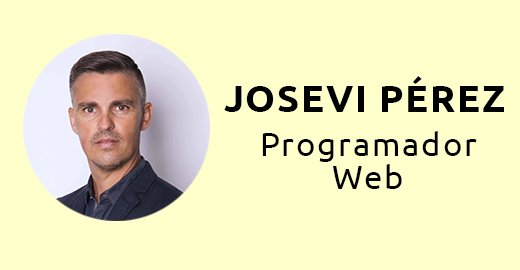
<style>
.page{position:relative;width:520px;height:270px;background:#ffffcc}
.page>*{position:absolute;margin:0}
.t1{font:37.5px "Ubuntu-Bold";letter-spacing:0.05em;color:#000000}
.t2{font:33.3px/33.3px "Ubuntu-Regular";letter-spacing:0.05em;color:#000000}
</style>
<div class="page">
<p class="t1" style="left:224px;top:76px;width:280px;height:36px">JOSEVI PÉREZ</p>
<p class="t2" style="left:262px;top:131px;width:215px;height:58px;text-align:center">Programador<br>Web</p>
</div>
